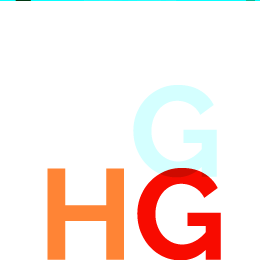
<style>
.page{position:relative;width:260px;height:260px;background:#ffffff}
.page>*{position:absolute;margin:0}
.t1{font:128px "Raleway-Bold"}
</style>
<div class="page">
<p class="t1" style="left:43px;top:84px;width:174px;height:93px">HG</p>
</div>
